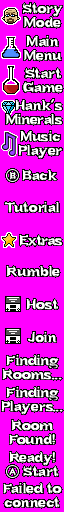
<style>
.page{position:relative;width:64px;height:512px;background:#ff00ff}
.page>*{position:absolute;margin:0}
.t1{font:13.6px/14px "Bundy-Regular";color:#ffffff;font-weight:bold;scale:1.05 1}
.t2{font:13.6px/14px "Bundy-Regular";letter-spacing:-0.05em;color:#ffffff;font-weight:bold;scale:1.05 1}
.t3{font:9px "Bundy-Regular";color:#ffffff;font-weight:bold}
.t4{font:13.6px "Bundy-Regular";color:#ffffff;font-weight:bold;scale:1.05 1}
.t5{font:13.6px "Bundy-Regular";letter-spacing:-0.05em;color:#ffffff;font-weight:bold;scale:1.05 1}
.t6{font:13.6px "Bundy-Regular";letter-spacing:-0.005em;color:#ffffff;font-weight:bold;scale:1.05 1}
</style>
<div class="page">
<p class="t1" style="left:23px;top:2px;width:40px;height:26px;text-align:center">Story<br>Mode</p>
<p class="t1" style="left:24px;top:36px;width:38px;height:25px;text-align:center">Main<br>Menu</p>
<p class="t1" style="left:23px;top:67px;width:40px;height:26px;text-align:center">Start<br>Game</p>
<p class="t1" style="left:6px;top:99px;width:56px;height:26px;text-align:center">Hank’s<br>M<span class="t2">i</span>n<span class="t2">e</span>rals</p>
<p class="t1" style="left:18px;top:131px;width:44px;height:28px;text-align:center">Music<br>Player</p>
<p class="t3" style="left:10px;top:172px;width:6px;height:8px">B</p>
<p class="t4" style="left:22px;top:169px;width:35px;height:12px">Back</p>
<p class="t4" style="left:4px;top:201px;width:56px;height:12px">Tutorial</p>
<p class="t5" style="left:19px;top:234px;width:43px;height:12px">Extr<span class="t6">a</span>s</p>
<p class="t4" style="left:6px;top:265px;width:54px;height:12px">Rumble</p>
<p class="t4" style="left:26px;top:298px;width:32px;height:12px">Host</p>
<p class="t4" style="left:27px;top:332px;width:30px;height:11px">Join</p>
<p class="t1" style="left:2px;top:355px;width:60px;height:25px;text-align:center">Finding<br>Rooms...</p>
<p class="t1" style="left:1px;top:387px;width:62px;height:28px;text-align:center">Finding<br>Players...</p>
<p class="t1" style="left:9px;top:420px;width:46px;height:25px;text-align:center">Room<br>Found!</p>
<p class="t1" style="left:9px;top:451px;width:50px;height:26px;text-align:center">Ready!<br>    Start</p>
<p class="t3" style="left:9px;top:468px;width:7px;height:8px">A</p>
<p class="t1" style="left:3px;top:482px;width:59px;height:26px;text-align:center">Failed to<br>connect</p>
</div>
